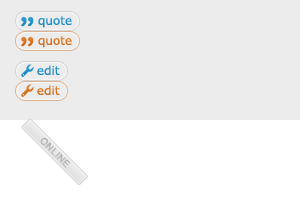
<style>
.page{position:relative;width:300px;height:200px;background:#ececec}
.page>*{position:absolute;margin:0}
.t1{font:31.4px "ArialRoundedMTBold";color:#1e8fc7}
.t2{font:12px "Verdana";color:#1e8fc7}
.t3{font:31.4px "ArialRoundedMTBold";color:#da7320}
.t4{font:12px "Verdana";color:#da7320}
</style>
<div class="page">
<p class="t1" style="left:21px;top:16px;width:13px;height:11px">”</p>
<p class="t2" style="left:38px;top:16px;width:34px;height:12px">quote</p>
<p class="t3" style="left:21px;top:36px;width:13px;height:11px">”</p>
<p class="t4" style="left:38px;top:36px;width:34px;height:12px">quote</p>
<p class="t2" style="left:37px;top:65px;width:23px;height:10px">edit</p>
<p class="t4" style="left:37px;top:85px;width:23px;height:10px">edit</p>
</div>
